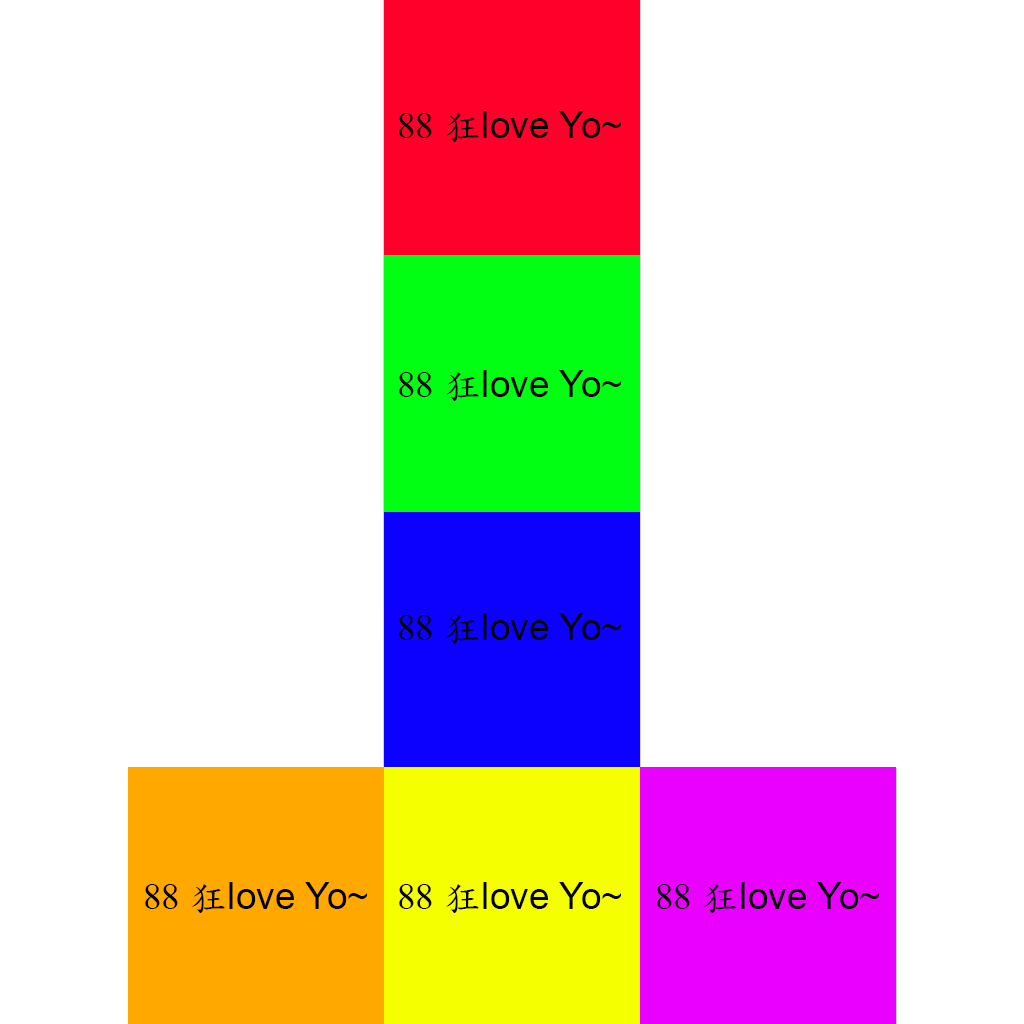
<style>
.page{position:relative;width:1024px;height:1024px;background:#ffffff}
.page>*{position:absolute;margin:0}
.t1{font:37.2px "ArialMT";color:#000000}
.t2{font:37.2px "TimesNewRomanPSMT";color:#000000}
.t3{font:37.2px "DFKaiShu-SB-Estd-BF";color:#000000}
</style>
<div class="page">
<p class="t1" style="left:399px;top:111px;width:222px;height:31px"><span class="t2">88 </span><span class="t3">狂</span>love Yo~</p>
<p class="t1" style="left:399px;top:370px;width:222px;height:31px"><span class="t2">88 </span><span class="t3">狂</span>love Yo~</p>
<p class="t1" style="left:399px;top:613px;width:222px;height:31px"><span class="t2">88 </span><span class="t3">狂</span>love Yo~</p>
<p class="t1" style="left:145px;top:882px;width:222px;height:31px"><span class="t2">88 </span><span class="t3">狂</span>love Yo~</p>
<p class="t1" style="left:399px;top:882px;width:222px;height:31px"><span class="t2">88 </span><span class="t3">狂</span>love Yo~</p>
<p class="t1" style="left:657px;top:882px;width:222px;height:31px"><span class="t2">88 </span><span class="t3">狂</span>love Yo~</p>
</div>
